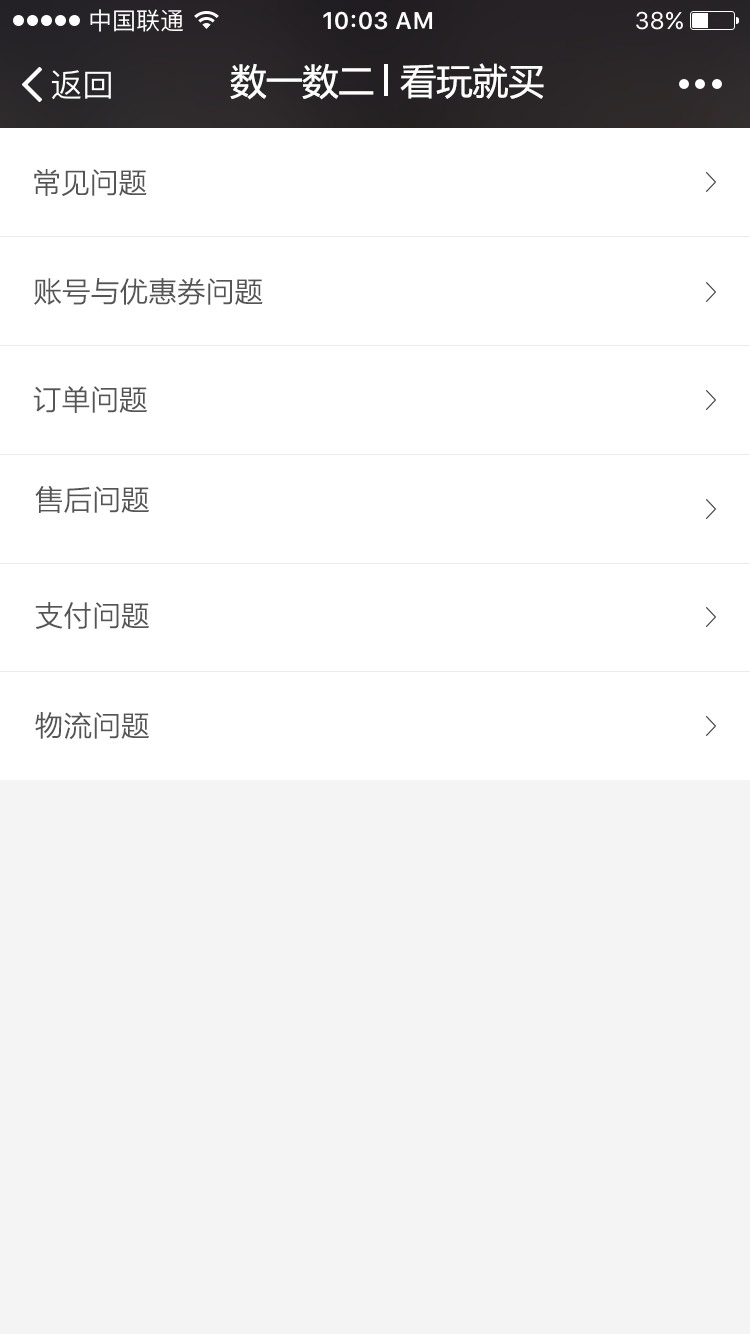
<style>
.page{position:relative;width:750px;height:1334px;background:#ffffff}
.page>*{position:absolute;margin:0}
.t1{font:36px "MicrosoftYaHei";color:#ffffff}
.t2{font:28px "MicrosoftYaHeiLight";color:#555555;font-weight:bold}
</style>
<div class="page">
<p class="t1" style="left:230px;top:63px;width:144px;height:37px">数一数二</p>
<p class="t1" style="left:400px;top:63px;width:144px;height:36px">看玩就买</p>
<p class="t2" style="left:34px;top:169px;width:113px;height:27px">常见问题</p>
<p class="t2" style="left:34px;top:278px;width:229px;height:27px">账号与优惠券问题</p>
<p class="t2" style="left:33px;top:386px;width:114px;height:27px">订单问题</p>
<p class="t2" style="left:35px;top:485px;width:114px;height:28px">售后问题</p>
<p class="t2" style="left:35px;top:602px;width:114px;height:27px">支付问题</p>
<p class="t2" style="left:35px;top:712px;width:114px;height:27px">物流问题</p>
</div>
